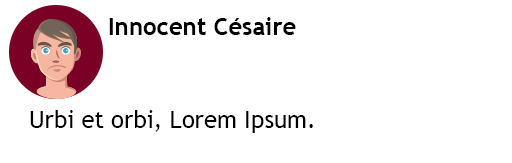
<style>
.page{position:relative;width:512px;height:163px;background:#ffffff}
.page>*{position:absolute;margin:0}
.t1{font:24px "TrebuchetMS-Bold";color:#000000}
.t2{font:24px "TrebuchetMS";color:#000000}
</style>
<div class="page">
<p class="t1" style="left:109px;top:17px;width:187px;height:18px">Innocent Césaire</p>
<p class="t2" style="left:30px;top:110px;width:283px;height:23px">Urbi et orbi, Lorem Ipsum.</p>
</div>
